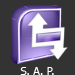
<style>
.page{position:relative;width:75px;height:75px;background:#333333}
.page>*{position:absolute;margin:0}
.t1{font:11px "Tahoma";color:#ffffff}
</style>
<div class="page">
<p class="t1" style="left:20px;top:67px;width:34px;height:8px">S. A. P.</p>
</div>
